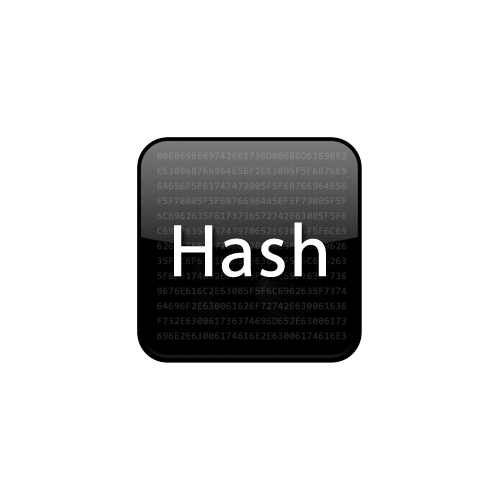
<style>
.page{position:relative;width:500px;height:500px;background:#ffffff}
.page>*{position:absolute;margin:0}
.t1{font:75px "Myriad-Roman";color:#ffffff;font-weight:bold}
</style>
<div class="page">
<p class="t1" style="left:174px;top:222px;width:152px;height:56px">Hash</p>
</div>
